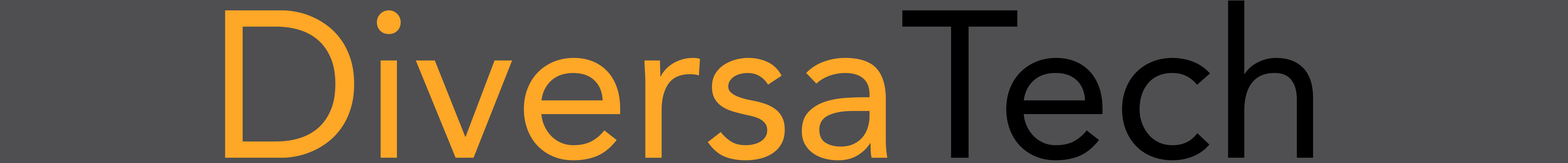
<style>
.page{position:relative;width:1568px;height:163px;background:#4f4f51}
.page>*{position:absolute;margin:0}
.t1{font:208.2px "Avenir-Roman";color:#ffa726}
.t2{font:208.2px "Avenir-Roman";color:#000000}
</style>
<div class="page">
<p class="t1" style="left:225px;top:0px;width:1088px;height:161px">Diversa<span class="t2">Tech</span></p>
</div>
